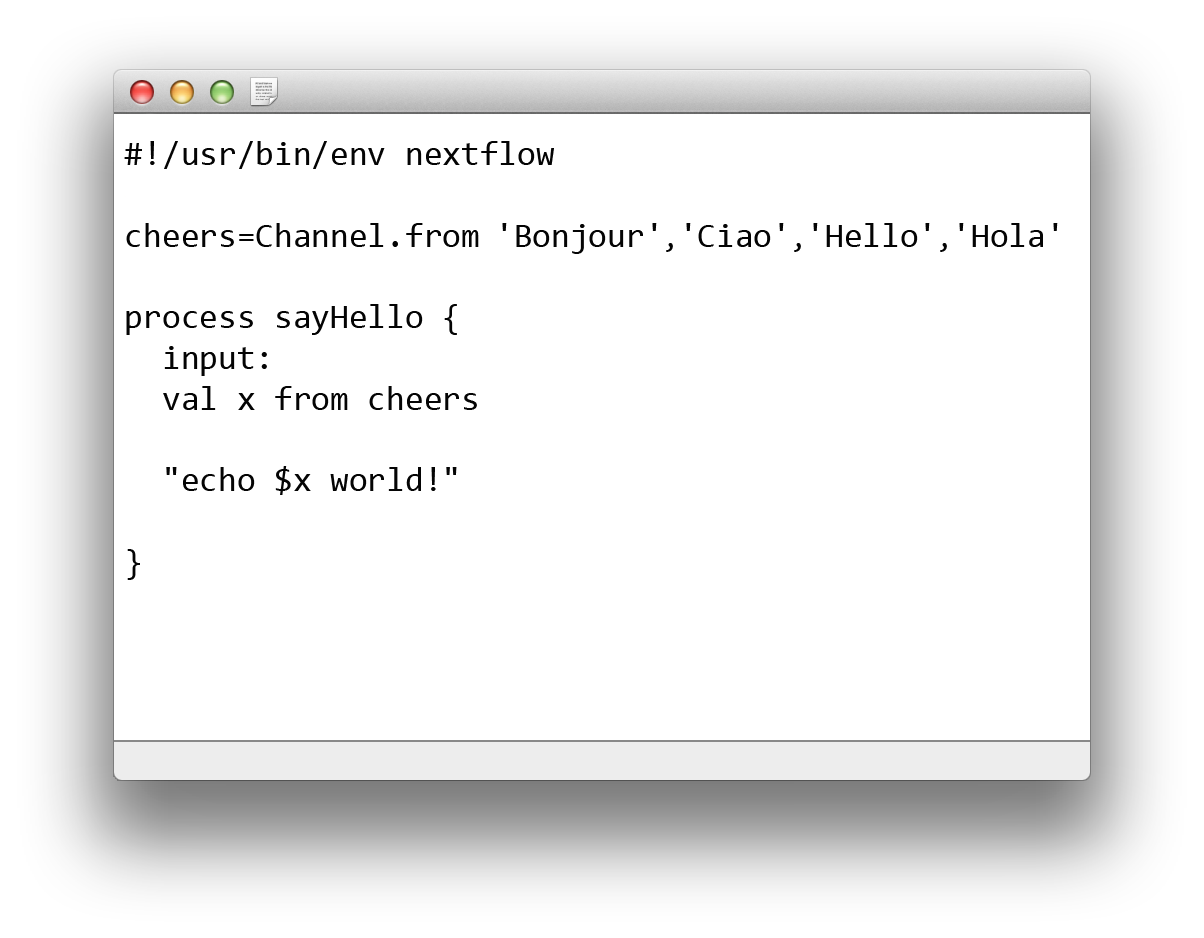
<style>
.page{position:relative;width:1204px;height:938px;background:#ffffff}
.page>*{position:absolute;margin:0}
.t1{font:34px "Consolas";color:#040404}
.t2{font:28px "Consolas";color:#040404}
</style>
<div class="page">
<p class="t1" style="left:124px;top:141px;width:934px;height:439px">#!/usr/bin/env nextflow <br><br>cheers=Channel.from 'Bonjour'<span class="t2">,</span>'Ciao'<span class="t2">,</span>'Hello'<span class="t2">,</span>'Hola'<br><br>process sayHello {  <br>  input:<br>  val x from cheers  <br><br>  "echo $x world!"<br>  <br>}</p>
</div>
